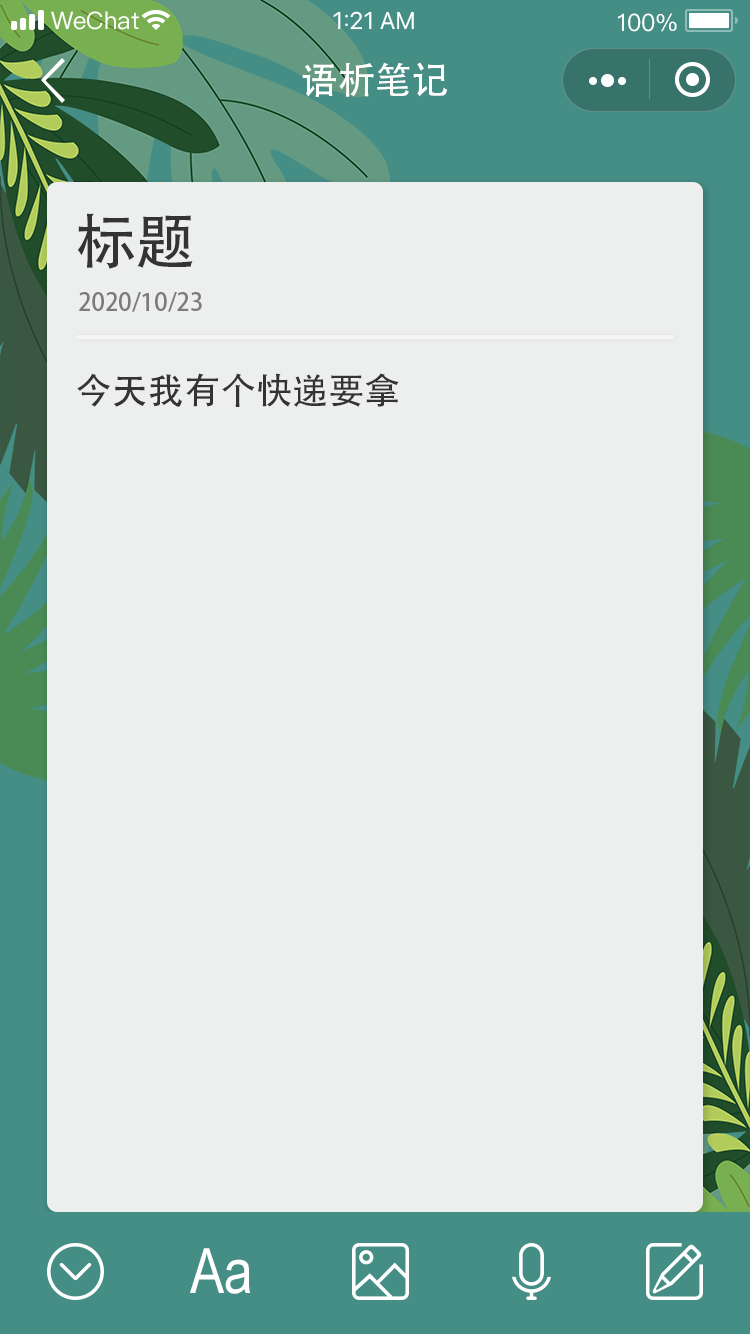
<style>
.page{position:relative;width:750px;height:1334px;background:#edeeee}
.page>*{position:absolute;margin:0}
.t1{font:37px "AdobeHeitiStd-Regular";color:#ffffff}
.t2{font:60px "AdobeHeitiStd-Regular";color:#333333}
.t3{font:24px "AdobeHeitiStd-Regular";color:#7b7b7b}
.t4{font:36px "AdobeHeitiStd-Regular";color:#333333}
.t5{font:62.6px "ArialNarrow";color:#ffffff}
</style>
<div class="page">
<p class="t1" style="left:302px;top:62px;width:146px;height:35px">语析笔记</p>
<p class="t2" style="left:77px;top:213px;width:116px;height:56px">标题</p>
<p class="t3" style="left:79px;top:292px;width:123px;height:20px">2020/10/23</p>
<p class="t4" style="left:77px;top:373px;width:322px;height:34px">今天我有个快递要拿</p>
<p class="t5" style="left:190px;top:1248px;width:61px;height:46px">Aa</p>
</div>
